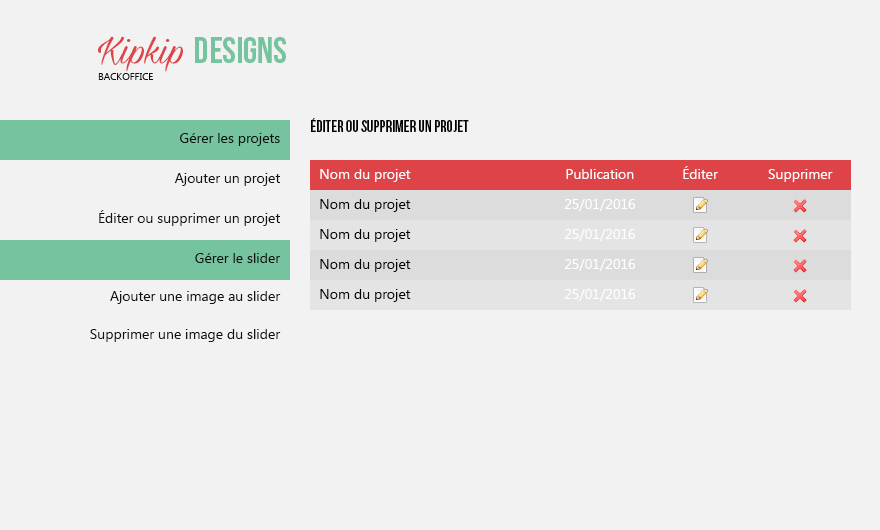
<style>
.page{position:relative;width:880px;height:530px;background:#f2f2f2}
.page>*{position:absolute;margin:0}
.t1{font:10px/17px "SegoeUI";color:#111111}
.t2{font:44px/17px "MilasianCircaPERSONAL";color:#de4347}
.t3{font:37px/17px "BebasNeue";color:#76c39f}
.t4{font:16px "BebasNeue";color:#000000}
.t5{font:14px "SegoeUI";color:#111111}
.t6{font:14px "SegoeUI";color:#ffffff}
.t7{font:14px "SegoeUI";color:#000000}
</style>
<div class="page">
<p class="t1" style="left:98px;top:36px;width:188px;height:44px"><span class="t2">Kipkip </span><span class="t3">DESIGNS<br></span>BACKOFFICE</p>
<p class="t4" style="left:311px;top:118px;width:158px;height:14px">ÉDITER OU SUPPRIMER UN PROJET</p>
<p class="t5" style="left:180px;top:133px;width:100px;height:13px">Gérer les projets</p>
<p class="t5" style="left:174px;top:173px;width:106px;height:13px">Ajouter un projet</p>
<p class="t6" style="left:320px;top:169px;width:91px;height:13px">Nom du projet</p>
<p class="t6" style="left:566px;top:169px;width:68px;height:10px">Publication</p>
<p class="t6" style="left:683px;top:166px;width:35px;height:13px">Éditer</p>
<p class="t6" style="left:768px;top:169px;width:65px;height:13px">Supprimer</p>
<p class="t7" style="left:320px;top:199px;width:91px;height:13px">Nom du projet</p>
<p class="t6" style="left:564px;top:199px;width:71px;height:12px">25/01/2016</p>
<p class="t5" style="left:99px;top:210px;width:181px;height:16px">Éditer ou supprimer un projet</p>
<p class="t7" style="left:320px;top:229px;width:91px;height:13px">Nom du projet</p>
<p class="t6" style="left:564px;top:229px;width:71px;height:12px">25/01/2016</p>
<p class="t5" style="left:195px;top:253px;width:86px;height:10px">Gérer le slider</p>
<p class="t7" style="left:320px;top:259px;width:91px;height:13px">Nom du projet</p>
<p class="t6" style="left:564px;top:259px;width:71px;height:12px">25/01/2016</p>
<p class="t5" style="left:110px;top:291px;width:171px;height:13px">Ajouter une image au slider</p>
<p class="t7" style="left:320px;top:289px;width:91px;height:13px">Nom du projet</p>
<p class="t6" style="left:564px;top:289px;width:71px;height:12px">25/01/2016</p>
<p class="t5" style="left:90px;top:329px;width:191px;height:13px">Supprimer une image du slider</p>
</div>
